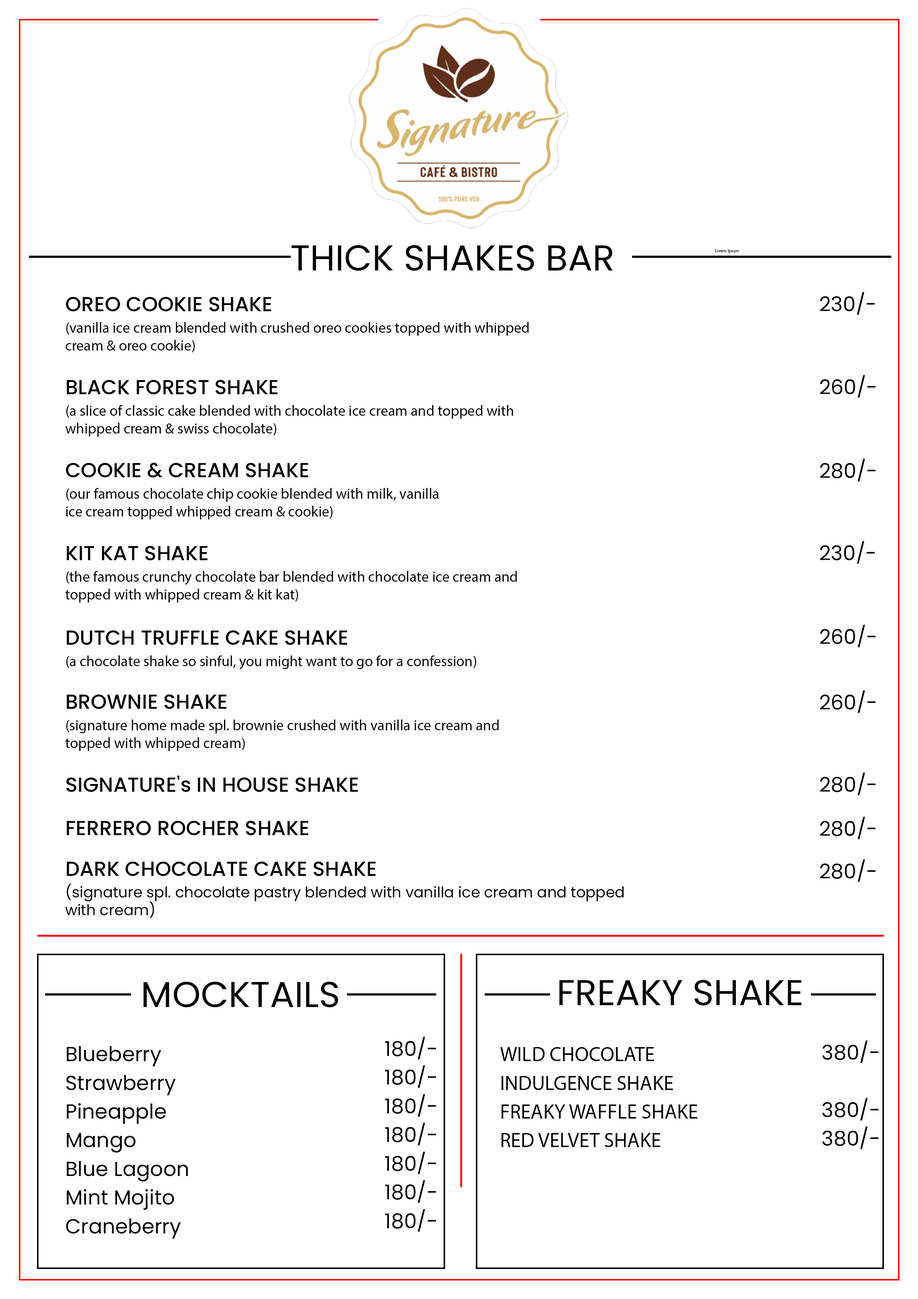
<style>
.page{position:relative;width:918px;height:1299px;background:#ffffff}
.page>*{position:absolute;margin:0}
.t1{font:35.9px "Poppins-Regular";color:#000000;text-transform:uppercase}
.t2{font:4.4px "MyriadPro-Regular";color:#000000}
.t3{font:20.4px "Poppins-Regular";color:#000000}
.t4{font:14.8px/17.8px "Poppins-Regular";color:#000000}
.t5{font:20.4px/28.7px "Poppins-Medium";color:#000000}
.t6{font:20.4px "Poppins-Medium";color:#000000}
.t7{font:20.4px/28.7px "Poppins-Regular";color:#000000}
</style>
<div class="page">
<p class="t1" style="left:292px;top:245px;width:321px;height:26px">THICK SHAKES BAR</p>
<p class="t2" style="left:715px;top:249px;width:24px;height:4px">Lorem Ipsum</p>
<p class="t3" style="left:820px;top:292px;width:55px;height:23px">230/-</p>
<p class="t4" style="left:66px;top:297px;width:463px;height:55px"><span class="t5">OREO COOKIE SHAKE<br></span>(vanilla ice cream blended with crushed oreo cookies topped with whipped<br>cream &amp; oreo cookie)</p>
<p class="t3" style="left:820px;top:375px;width:56px;height:23px">260/-</p>
<p class="t4" style="left:65px;top:380px;width:448px;height:56px"><span class="t5">BLACK FOREST SHAKE<br></span>(a slice of classic cake blended with chocolate ice cream and topped with<br>whipped cream &amp; swiss chocolate)</p>
<p class="t3" style="left:820px;top:459px;width:56px;height:23px">280/-</p>
<p class="t4" style="left:66px;top:463px;width:373px;height:56px"><span class="t5">COOKIE &amp; CREAM SHAKE<br></span>(our famous chocolate chip cookie blended with milk, vanilla<br>ice cream topped whipped cream &amp; cookie)</p>
<p class="t4" style="left:65px;top:546px;width:452px;height:56px"><span class="t5">KIT KAT SHAKE<br></span>(the famous crunchy chocolate bar blended with chocolate ice cream and<br>topped with whipped cream &amp; kit kat)</p>
<p class="t3" style="left:820px;top:541px;width:55px;height:23px">230/-</p>
<p class="t3" style="left:820px;top:624px;width:56px;height:23px">260/-</p>
<p class="t4" style="left:66px;top:630px;width:410px;height:39px"><span class="t5">DUTCH TRUFFLE CAKE SHAKE<br></span>(a chocolate shake so sinful, you might want to go for a confession)</p>
<p class="t4" style="left:65px;top:694px;width:434px;height:57px"><span class="t5">BROWNIE SHAKE<br></span>(signature home made spl. brownie crushed with vanilla ice cream and<br>topped with whipped cream)</p>
<p class="t3" style="left:820px;top:690px;width:56px;height:23px">260/-</p>
<p class="t3" style="left:820px;top:772px;width:56px;height:23px">280/-</p>
<p class="t6" style="left:66px;top:775px;width:292px;height:17px">SIGNATURE's IN HOUSE SHAKE</p>
<p class="t6" style="left:67px;top:820px;width:242px;height:15px">FERRERO ROCHER SHAKE</p>
<p class="t3" style="left:820px;top:816px;width:56px;height:23px">280/-</p>
<p class="t4" style="left:65px;top:861px;width:559px;height:57px"><span class="t5">DARK CHOCOLATE CAKE SHAKE<br></span>(signature spl. chocolate pastry blended with vanilla ice cream and topped<br>with cream)</p>
<p class="t3" style="left:820px;top:859px;width:56px;height:23px">280/-</p>
<p class="t1" style="left:143px;top:981px;width:195px;height:26px">MOCKTAILS</p>
<p class="t1" style="left:559px;top:979px;width:243px;height:26px">FREAKY SHAKE</p>
<p class="t7" style="left:385px;top:1036px;width:51px;height:196px">180/-<br>180/-<br>180/-<br>180/-<br>180/-<br>180/-<br>180/-</p>
<p class="t7" style="left:66px;top:1046px;width:122px;height:193px">Blueberry<br>Strawberry<br>Pineapple<br>Mango<br>Blue Lagoon<br>Mint Mojito<br>Craneberry</p>
<p class="t7" style="left:500px;top:1047px;width:197px;height:100px">WILD CHOCOLATE<br>INDULGENCE SHAKE<br>FREAKY WAFFLE SHAKE<br>RED VELVET SHAKE</p>
<p class="t7" style="left:822px;top:1040px;width:57px;height:109px">380/-<br><br>380/-<br>380/-</p>
</div>
